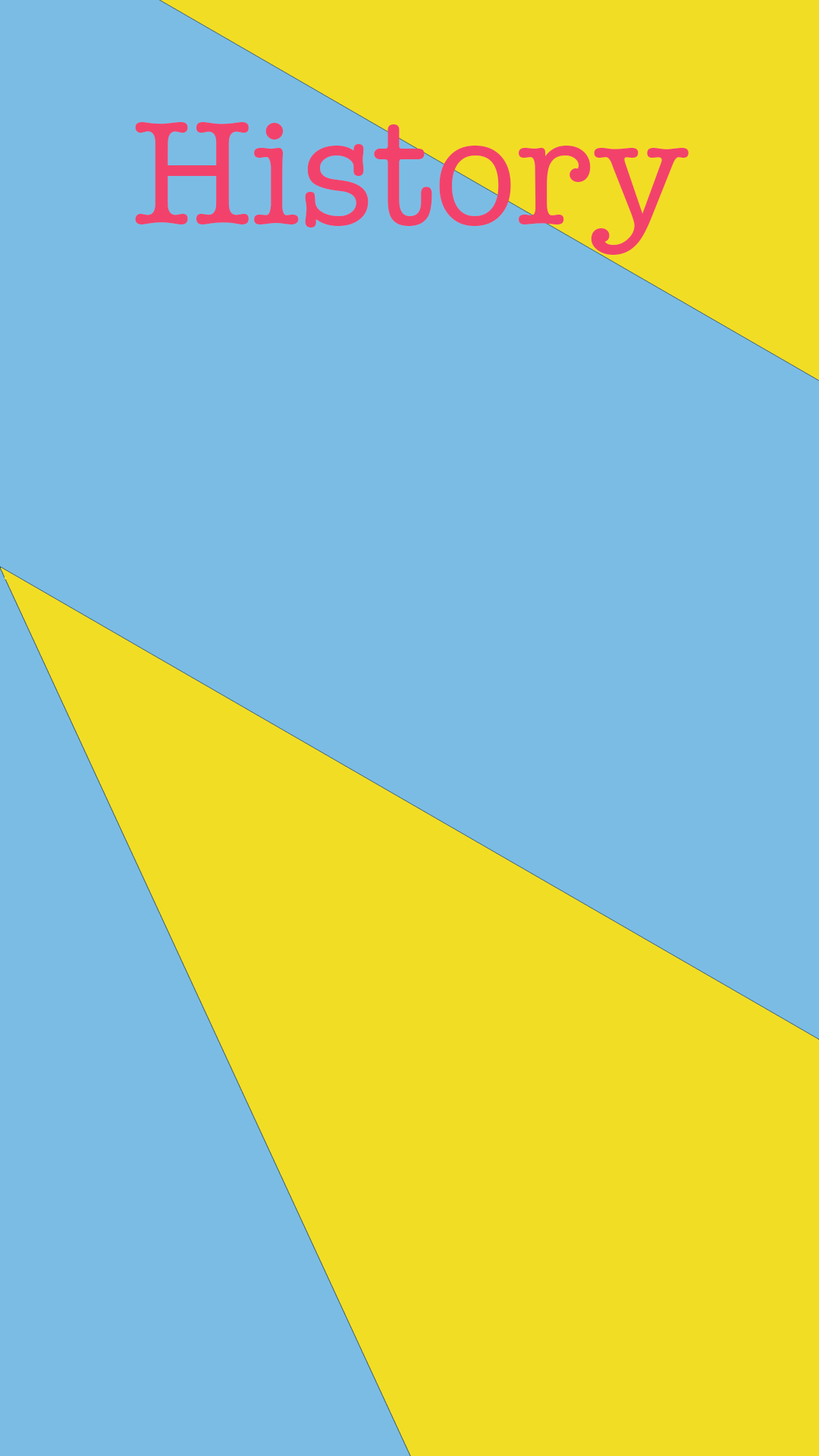
<style>
.page{position:relative;width:819px;height:1456px;background:#7bbce5}
.page>*{position:absolute;margin:0}
.t1{font:151.7px "AmericanTypewriter";color:#f2426b}
</style>
<div class="page">
<p class="t1" style="left:135px;top:122px;width:554px;height:133px">History</p>
</div>
